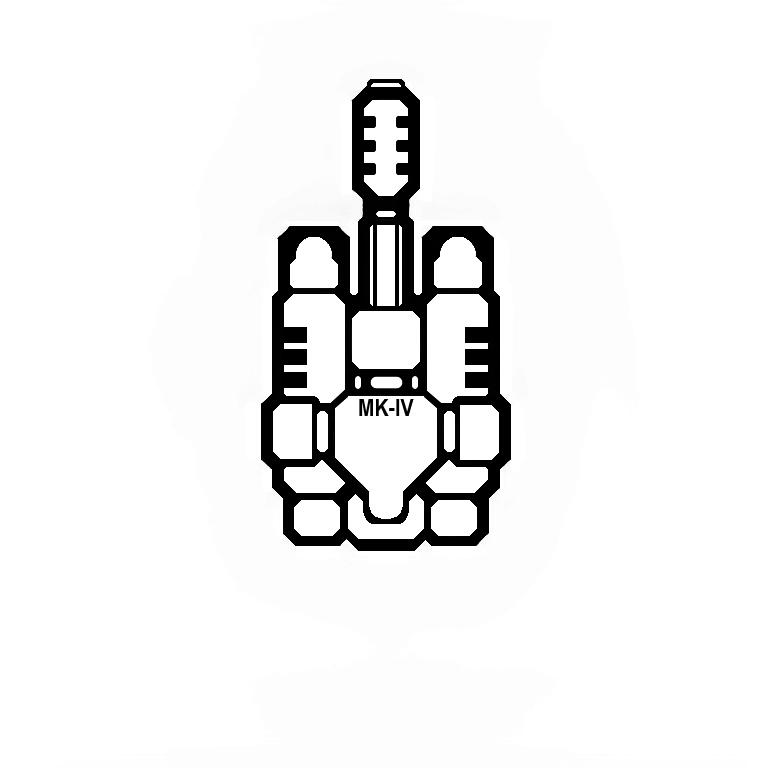
<style>
.page{position:relative;width:768px;height:768px;background:#ffffff}
.page>*{position:absolute;margin:0}
.t1{font:24px "ArialNarrow-Bold";color:#010002}
</style>
<div class="page">
<p class="t1" style="left:359px;top:399px;width:55px;height:17px">MK-IV</p>
</div>
